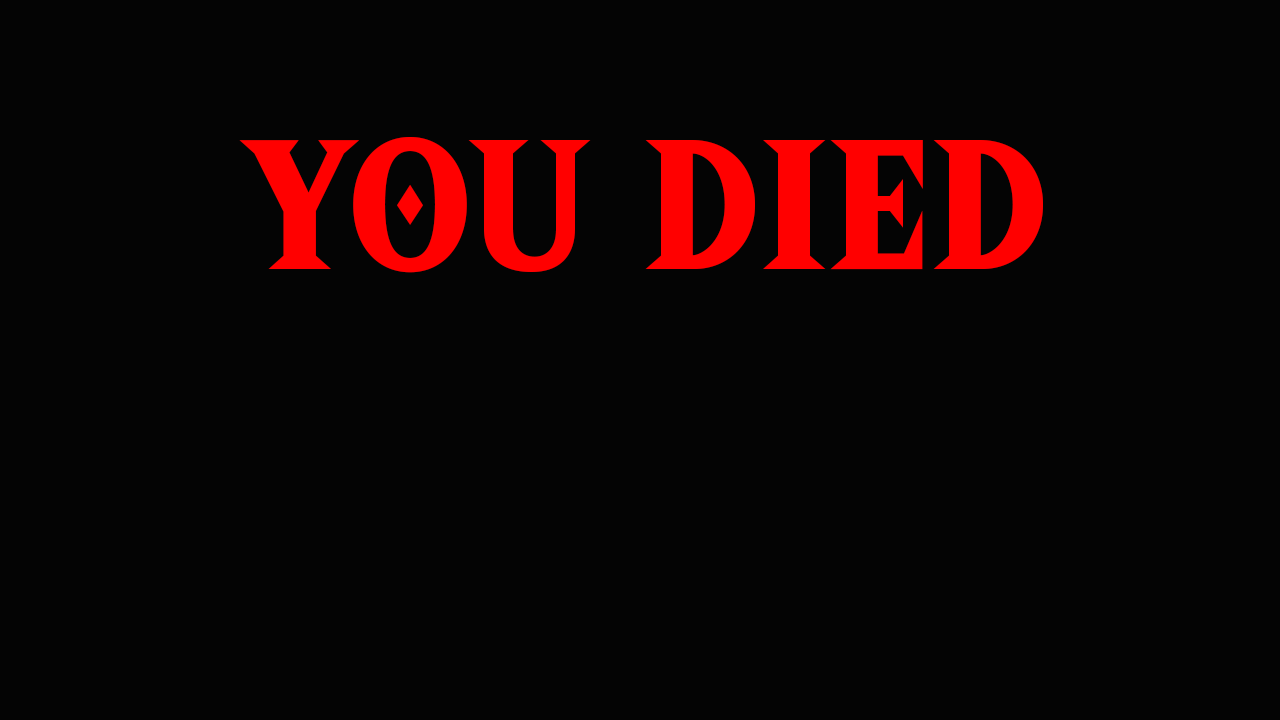
<style>
.page{position:relative;width:1280px;height:720px;background:#040404}
.page>*{position:absolute;margin:0}
.t1{font:213.6px "HyliaSerifBeta-Regular";color:#ff0000}
</style>
<div class="page">
<p class="t1" style="left:239px;top:137px;width:804px;height:136px">you died</p>
</div>
